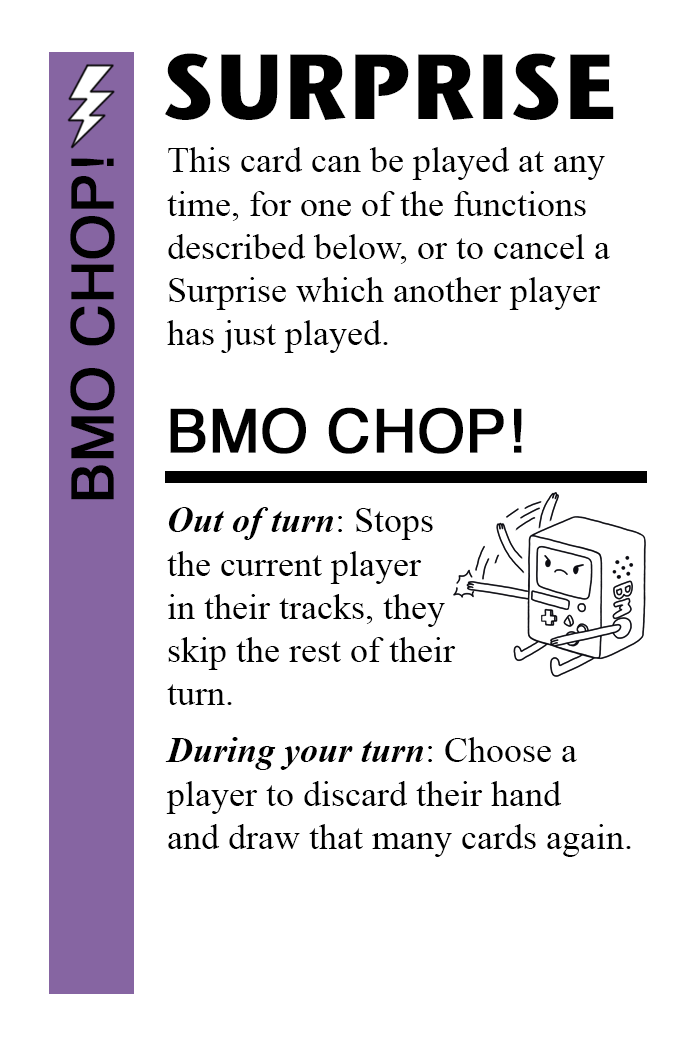
<style>
.page{position:relative;width:700px;height:1042px;background:#ffffff}
.page>*{position:absolute;margin:0}
.t1{font:92px "StoneSansITC-Bold";color:#000000}
.t2{font:36px "TimesNewRomanPSMT";color:#000000}
.t3{font:58px "Helvetica";color:#000000;font-weight:bold}
.t4{font:60px "Helvetica";color:#000000;font-weight:bold}
.t5{font:36px "TimesNewRomanPS-BoldItalicMT";color:#000000}
</style>
<div class="page">
<p class="t1" style="left:165px;top:53px;width:449px;height:67px">SURPRISE</p>
<p class="t2" style="left:167px;top:147px;width:443px;height:206px">This card can be played at any <br>time, for one of the functions<br>described below, or to cancel a<br>Surprise which another player<br>has just played.</p>
<p class="t3" style="left:70px;top:158px;width:45px;height:342px;rotate:-90deg">BMO CHOP!</p>
<p class="t4" style="left:170px;top:407px;width:352px;height:47px">BMO CHOP!</p>
<p class="t2" style="left:167px;top:507px;width:289px;height:198px"><span class="t5">Out of turn</span>: Stops<br>the current player<br>in their tracks, they<br>skip the rest of their<br>turn.</p>
<p class="t2" style="left:165px;top:737px;width:466px;height:120px"><span class="t5">During your turn</span>: Choose a<br>player to discard their hand<br>and draw that many cards again.</p>
</div>
